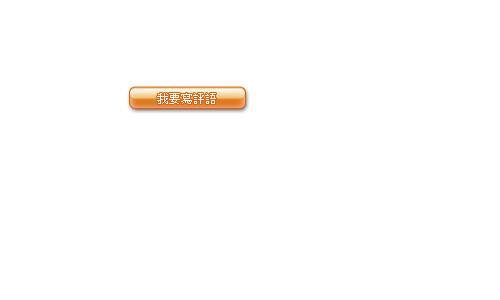
<style>
.page{position:relative;width:500px;height:300px;background:#ffffff}
.page>*{position:absolute;margin:0}
.t1{font:12px "MingLiU";color:#ffffff}
</style>
<div class="page">
<p class="t1" style="left:157px;top:93px;width:59px;height:11px">我要寫評語</p>
</div>
